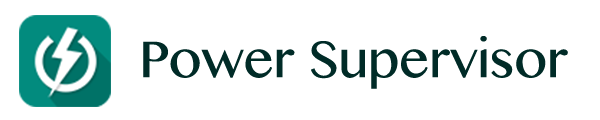
<style>
.page{position:relative;width:600px;height:120px;background:#ffffff}
.page>*{position:absolute;margin:0}
.t1{font:52px "MalayalamMN";color:#002b27}
</style>
<div class="page">
<p class="t1" style="left:143px;top:36px;width:425px;height:53px">Power Supervisor</p>
</div>
